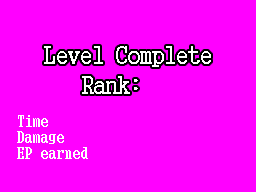
<style>
.page{position:relative;width:256px;height:192px;background:#ff00ff}
.page>*{position:absolute;margin:0}
.t1{font:25px/30px "GungsuhChe";color:#ffffff;scale:0.95 1}
.t2{font:16px/16px "GungsuhChe";color:#ffffff}
</style>
<div class="page">
<p class="t1" style="left:44px;top:46px;width:167px;height:48px">Level Complete<br>         Rank:</p>
<p class="t2" style="left:17px;top:115px;width:71px;height:44px">Time<br>Damage<br>EP earned</p>
</div>
